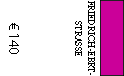
<style>
.page{position:relative;width:124px;height:76px;background:#ffffff}
.page>*{position:absolute;margin:0}
.t1{font:11px "AdobeDevanagari-Regular";color:#000000;scale:0.9 1}
.t2{font:14px "MyriadPro-Regular";color:#000000}
</style>
<div class="page">
<p class="t1" style="left:75px;top:1px;width:20px;height:74px;text-align:center;rotate:90deg">FRIEDRICH-EBRT-<br>STRASSE</p>
<p class="t2" style="left:9px;top:23px;width:10px;height:31px;rotate:90deg">€ 140</p>
</div>
